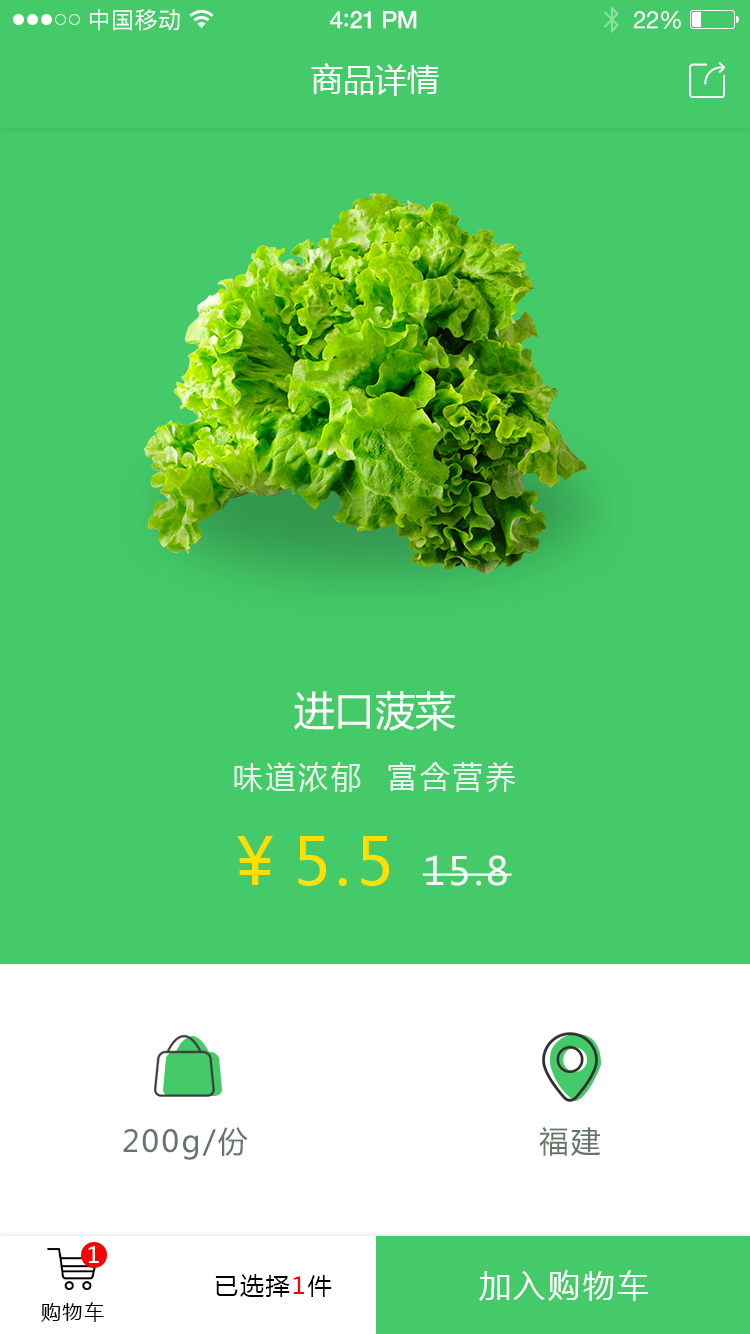
<style>
.page{position:relative;width:750px;height:1334px;background:#44ca68}
.page>*{position:absolute;margin:0}
.t1{font:23px "PingFangSC-Regular";letter-spacing:0.02em;color:#ffffff}
.t2{font:24px "HelveticaNeue-Medium";letter-spacing:-0.02em;color:#ffffff}
.t3{font:26px "Avenir-Medium";letter-spacing:-0.02em;color:#ffffff}
.t4{font:24px "HelveticaNeue";letter-spacing:-0.02em;color:#ffffff}
.t5{font:32px "MicrosoftYaHei";color:#ffffff;text-transform:uppercase}
.t6{font:40.7px "MicrosoftYaHei";color:#ffffff;text-transform:uppercase}
.t7{font:30.6px "MicrosoftYaHei";letter-spacing:0.08em;color:#e8f3eb;text-transform:uppercase}
.t8{font:64.8px "MicrosoftYaHei";letter-spacing:0.08em;color:#ffde00;text-transform:uppercase}
.t9{font:38.4px "MicrosoftYaHei";letter-spacing:0.08em;color:#f6faf7}
.t10{font:30px "MicrosoftYaHei";letter-spacing:0.08em;color:#657669}
.t11{font:22px "MicrosoftYaHei";letter-spacing:0.08em;color:#ffffff;text-transform:uppercase}
.t12{font:24px "MicrosoftYaHei";letter-spacing:0.08em;color:#000000;text-transform:uppercase}
.t13{font:24px "MicrosoftYaHei";letter-spacing:0.08em;color:#ff0000;text-transform:uppercase}
.t14{font:32px "MicrosoftYaHei";letter-spacing:0.08em;color:#ffffff;text-transform:uppercase}
.t15{font:20px "MicrosoftYaHei";letter-spacing:0.08em;color:#000000;text-transform:uppercase}
</style>
<div class="page">
<p class="t1" style="left:90px;top:9px;width:90px;height:22px">中国移动</p>
<p class="t2" style="left:330px;top:11px;width:87px;height:18px">4<span class="t3">:</span>21 PM</p>
<p class="t4" style="left:633px;top:11px;width:48px;height:18px">22%</p>
<p class="t5" style="left:311px;top:63px;width:128px;height:33px">商品详情</p>
<p class="t6" style="left:294px;top:691px;width:161px;height:40px">进口菠菜</p>
<p class="t7" style="left:234px;top:762px;width:282px;height:30px">味道浓郁  富含营养</p>
<p class="t8" style="left:237px;top:836px;width:152px;height:50px">￥5.5</p>
<p class="t9" style="left:422px;top:855px;width:90px;height:31px">15.8</p>
<p class="t10" style="left:123px;top:1127px;width:125px;height:33px">200g/份</p>
<p class="t10" style="left:539px;top:1127px;width:62px;height:29px">福建</p>
<p class="t11" style="left:88px;top:1246px;width:11px;height:17px">1</p>
<p class="t12" style="left:215px;top:1274px;width:117px;height:23px">已选择<span class="t13">1</span>件</p>
<p class="t14" style="left:479px;top:1270px;width:169px;height:31px">加入购物车</p>
<p class="t15" style="left:41px;top:1302px;width:63px;height:20px">购物车</p>
</div>
